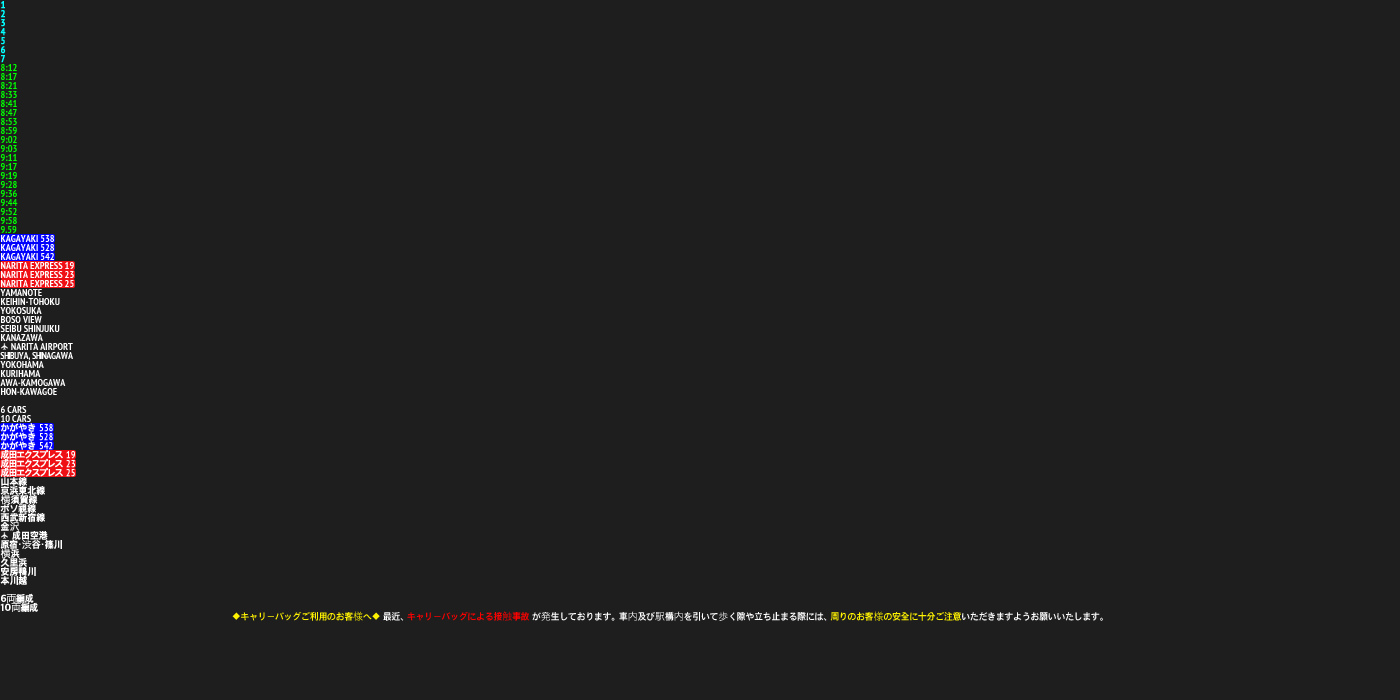
<style>
.page{position:relative;width:1400px;height:700px;background:#1e1e1e}
.page>*{position:absolute;margin:0}
.t1{font:10px/9px "PTSans-NarrowBold";color:#ffffff}
.t2{font:10px/9px "PTSans-NarrowBold";color:#00ffff;font-weight:bold}
.t3{font:10px/9px "PTSans-NarrowBold";color:#00ff00}
.t4{font:10px/9px "AppleSDGothicNeo-ExtraBold";color:#ffffff;font-weight:bold}
.t5{font:10px/9px "PTSans-Narrow";color:#ffffff;font-weight:bold}
.t6{font:10px/9px "HiraKakuProN-W3";color:#ffffff;font-weight:bold}
.t7{font:10px/9px "AppleSDGothicNeo-ExtraBold";color:#fff200}
.t8{font:10px/9px "HiraKakuProN-W3";color:#fff200}
.t9{font:10px/9px "AppleSDGothicNeo-ExtraBold";color:#ffffff}
.t10{font:10px/9px "AppleSDGothicNeo-ExtraBold";color:#ff0000}
.t11{font:10px/9px "HiraKakuProN-W3";color:#ff0000}
.t12{font:10px/9px "HiraKakuProN-W3";color:#ffffff}
</style>
<div class="page">
<p class="t1" style="left:0px;top:1px;width:1103px;height:620px"><span class="t2">1<br>2<br>3<br>4<br>5<br>6<br>7<br></span><span class="t3">8:12<br>8:17<br>8:21<br>8:33<br>8:41<br>8:47<br>8:53<br>8:59<br>9:02<br>9:03<br>9:11<br>9:17<br>9:19<br>9:28<br>9:36<br>9:44<br>9:52<br>9:58<br>9.59<br></span>KAGAYAKI 538<br>KAGAYAKI 528<br>KAGAYAKI 542<br>NARITA EXPRESS 19<br>NARITA EXPRESS 23<br>NARITA EXPRESS 25<br>YAMANOTE<br>KEIHIN-TOHOKU<br>YOKOSUKA<br>BOSO VIEW<br>SEIBU SHINJUKU<br>KANAZAWA<br>     NARITA AIRPORT<br>SHIBUYA, SHINAGAWA<br>YOKOHAMA<br>KURIHAMA<br>AWA-KAMOGAWA<br>HON-KAWAGOE<br><br>6 CARS<br>10 CARS<br><span class="t4">かがやき </span><span class="t5">538<br></span><span class="t4">かがやき </span><span class="t5">528<br></span><span class="t4">かがやき </span><span class="t5">542<br></span><span class="t4">成田エクスプレス </span><span class="t5">19<br></span><span class="t4">成田エクスプレス </span><span class="t5">23<br></span><span class="t4">成田エクスプレス </span><span class="t5">25<br></span><span class="t4">山本線<br>京浜東北線<br></span><span class="t6">横</span><span class="t4">須賀線<br>ボソ視線<br>西武新宿線<br>金</span><span class="t6">沢<br>    </span><span class="t4">成田空港<br>原宿・</span><span class="t6">渋</span><span class="t4">谷・篠川<br></span><span class="t6">横</span><span class="t4">浜<br>久里浜<br>安房鴨川<br>本川越<br><br>6</span><span class="t6">両</span><span class="t4">編成<br>10</span><span class="t6">両</span><span class="t4">編成<br>                                                                                        </span><span class="t7">◆キャリーバッグご利用のお客</span><span class="t8">様</span><span class="t7">へ◆ </span><span class="t9">最近、</span><span class="t10">キャリーバッグによる接</span><span class="t11">触</span><span class="t10">事故 </span><span class="t9">が</span><span class="t12">発</span><span class="t9">生しております。車</span><span class="t12">内</span><span class="t9">及び</span><span class="t12">駅</span><span class="t9">構</span><span class="t12">内</span><span class="t9">を引いて</span><span class="t12">歩</span><span class="t9">く隙や立ち止まる際には、</span><span class="t7">周りのお客</span><span class="t8">様</span><span class="t7">の安全に十分ご注意</span><span class="t9">いただきますようお願いいたします。</span></p>
</div>
